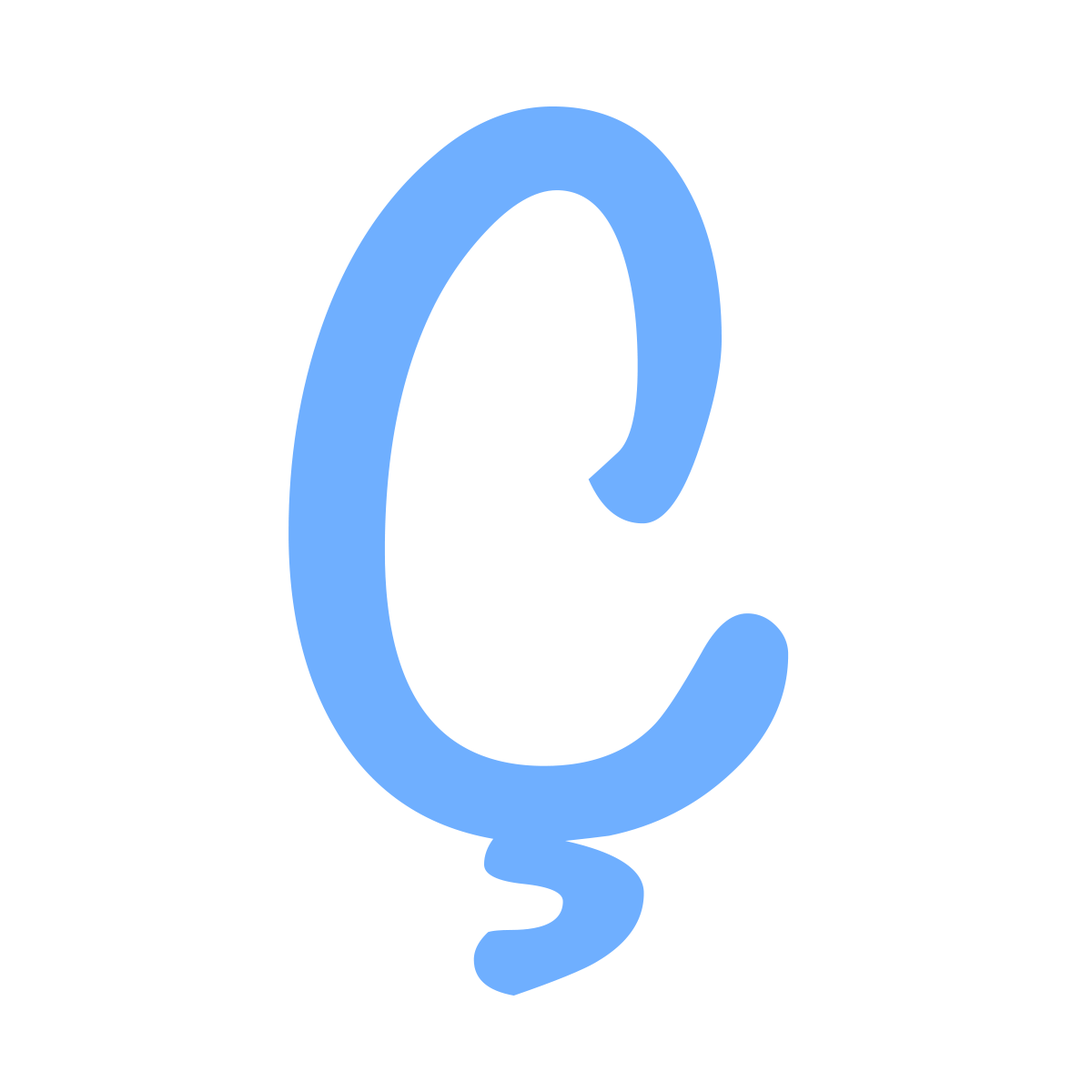
<style>
.page{position:relative;width:1092px;height:1092px;background:#ffffff}
.page>*{position:absolute;margin:0}
.t1{font:819px "Noteworthy-Bold";letter-spacing:0.02em;color:#6fafff}
</style>
<div class="page">
<p class="t1" style="left:288px;top:106px;width:501px;height:890px">Ç</p>
</div>
